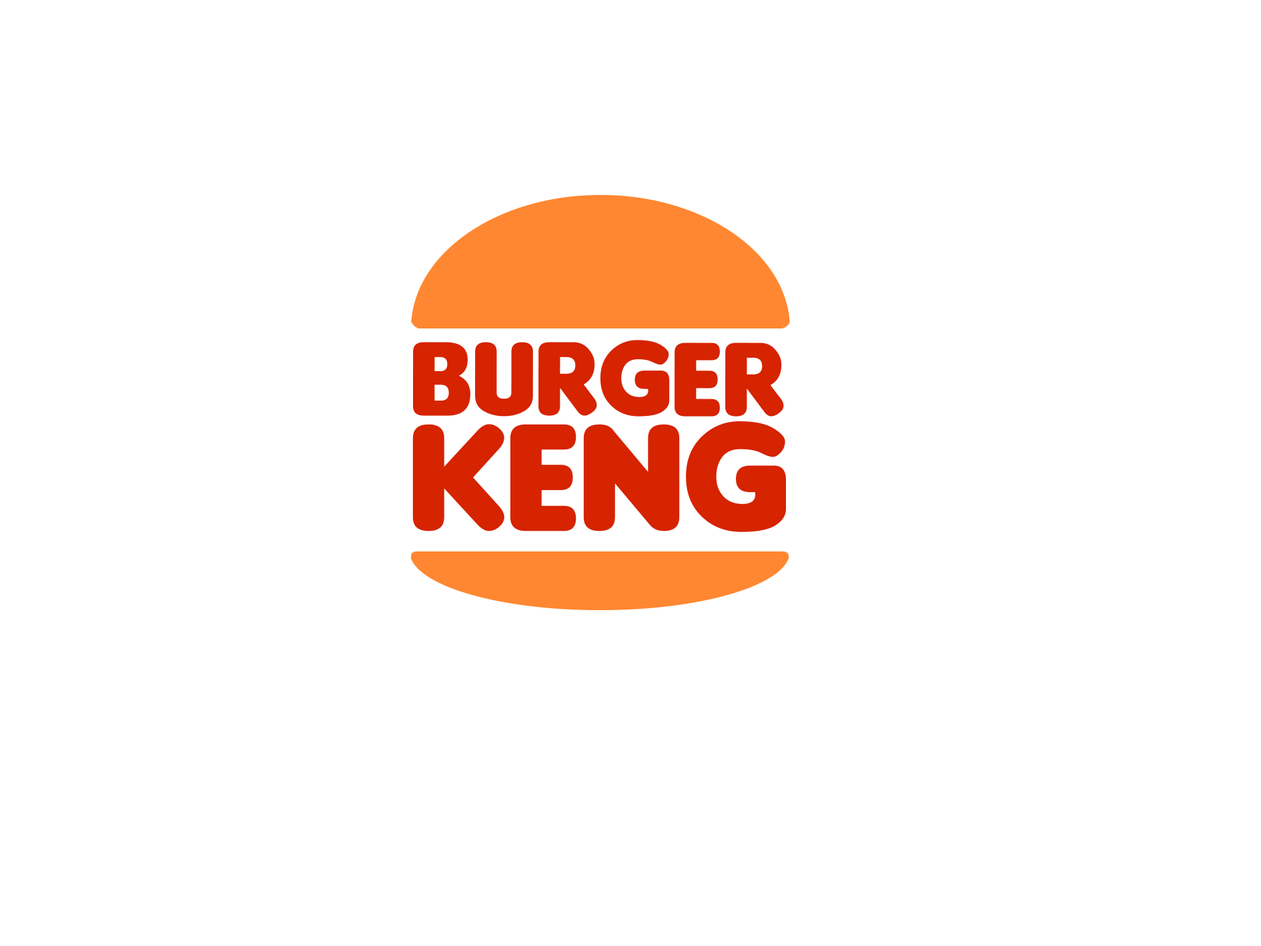
<style>
.page{position:relative;width:1261px;height:946px;background:#ffffff}
.page>*{position:absolute;margin:0}
.t1{font:111.2px "Insaniburger";color:#d62300}
.t2{font:161.3px "Insaniburger";color:#d62300}
</style>
<div class="page">
<p class="t1" style="left:413px;top:340px;width:371px;height:76px">BURGER</p>
<p class="t2" style="left:412px;top:421px;width:374px;height:111px">KENG</p>
</div>
